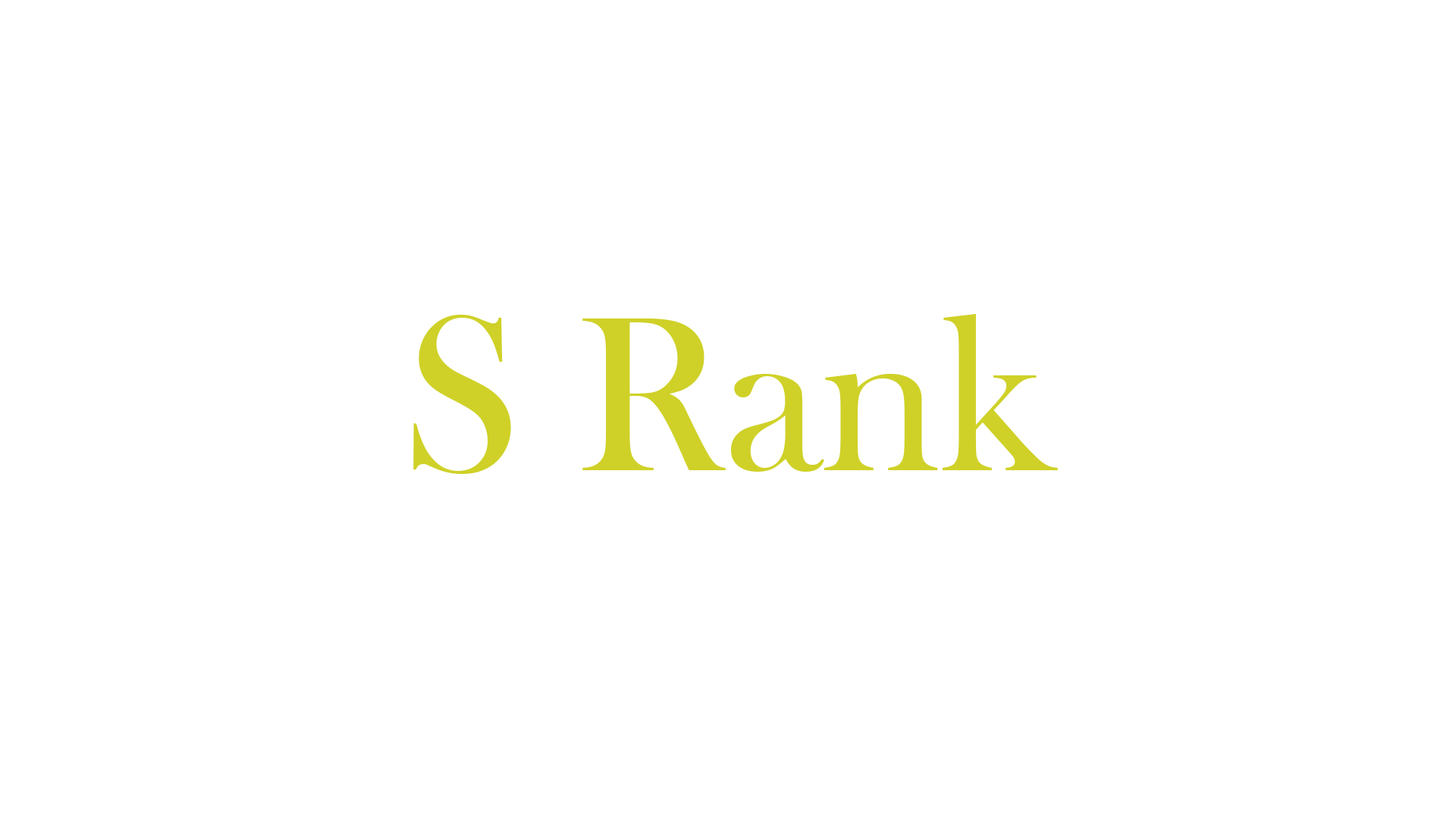
<style>
.page{position:relative;width:1456px;height:819px;background:#ffffff}
.page>*{position:absolute;margin:0}
.t1{font:227.5px "BaskOldFace";color:#cfd128}
</style>
<div class="page">
<p class="t1" style="left:413px;top:314px;width:645px;height:160px">S Rank</p>
</div>
